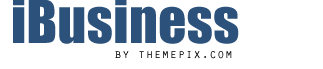
<style>
.page{position:relative;width:323px;height:69px;background:#ffffff}
.page>*{position:absolute;margin:0}
.t1{font:55px "Impact";letter-spacing:0.01em;color:#2c527b}
.t2{font:13px "OratorStd";letter-spacing:0.01em}
</style>
<div class="page">
<p class="t1" style="left:13px;top:0px;width:226px;height:44px">iBusiness</p>
<p class="t2" style="left:115px;top:51px;width:117px;height:8px">by themepix.com</p>
</div>
